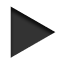
<style>
.page{position:relative;width:64px;height:64px;background:#ffffff}
.page>*{position:absolute;margin:0}
.t1{font:82.3px "AppleSymbols";color:#333333}
</style>
<div class="page">
<p class="t1" style="left:10px;top:6px;width:46px;height:52px">▶</p>
</div>
